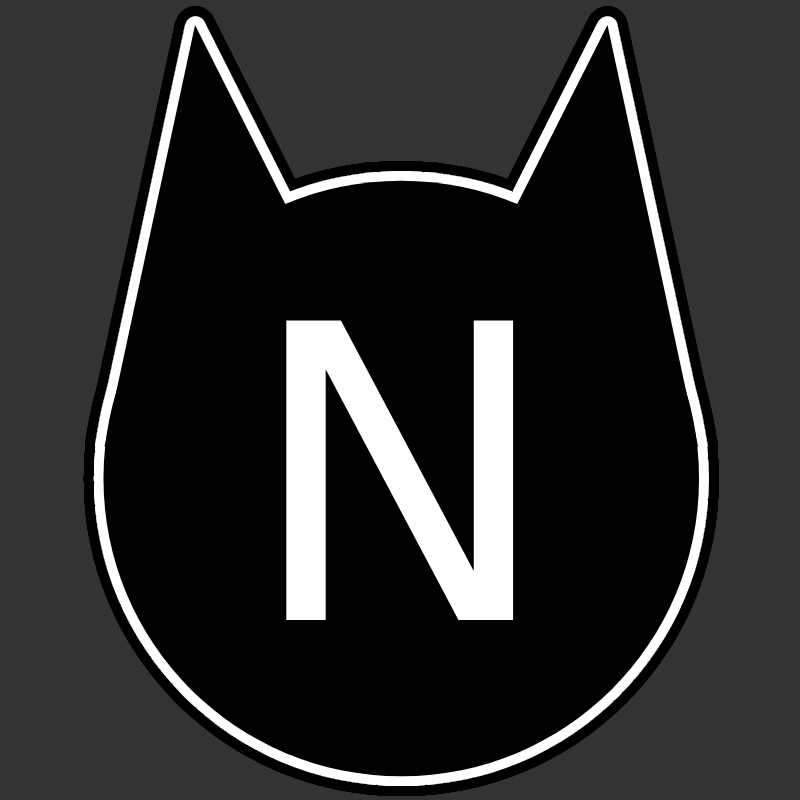
<style>
.page{position:relative;width:800px;height:800px;background:#000000}
.page>*{position:absolute;margin:0}
.t1{font:411px "Counter-StrikeRegular";color:#ffffff}
</style>
<div class="page">
<p class="t1" style="left:286px;top:320px;width:228px;height:300px">N</p>
</div>
